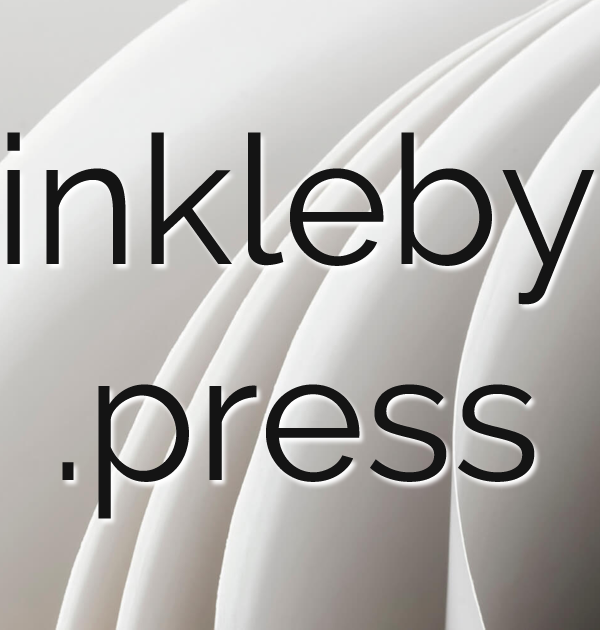
<style>
.page{position:relative;width:600px;height:630px}
.page>*{position:absolute;margin:0}
.t1{font:180px "Raleway-Regular";color:#141414}
</style>
<div class="page">
<p class="t1" style="left:7px;top:132px;width:587px;height:387px;text-align:center">inkleby<br>.press</p>
</div>
